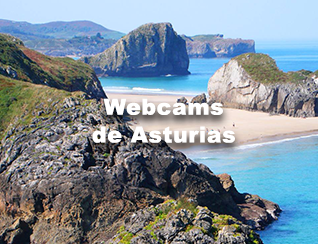
<style>
.page{position:relative;width:318px;height:244px}
.page>*{position:absolute;margin:0}
.t1{font:22.2px/27.8px "Arial-Black";letter-spacing:0.025em;color:#ffffff}
</style>
<div class="page">
<p class="t1" style="left:92px;top:98px;width:143px;height:45px;text-align:center">Webcams<br>de Asturias</p>
</div>
